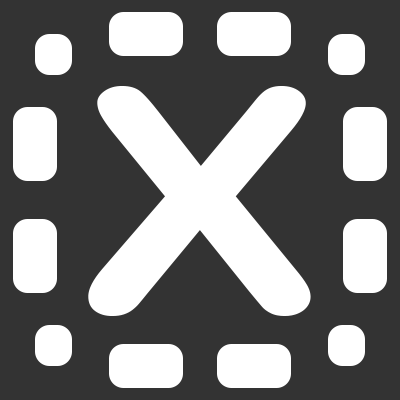
<style>
.page{position:relative;width:400px;height:400px;background:#333333}
.page>*{position:absolute;margin:0}
.t1{font:311.4px "ArialRoundedMTBold";color:#ffffff;scale:1.26 1}
</style>
<div class="page">
<p class="t1" style="left:88px;top:86px;width:223px;height:230px">X</p>
</div>
